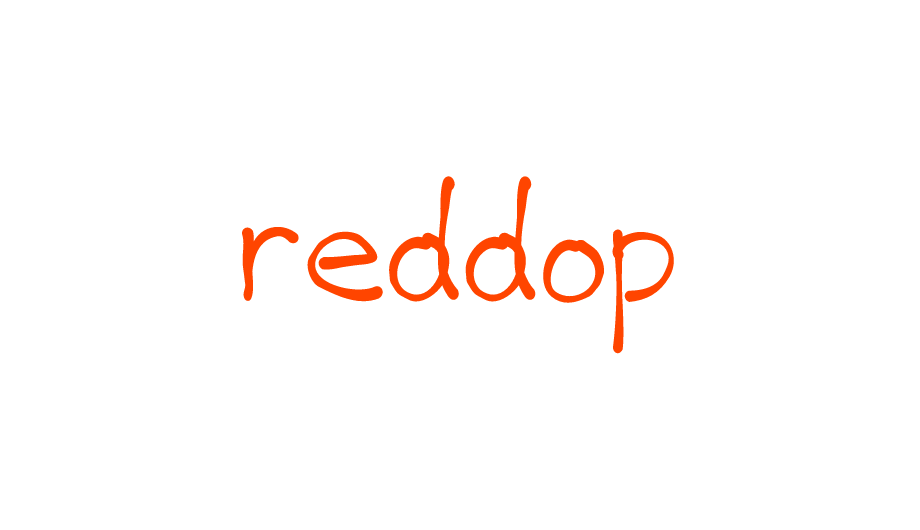
<style>
.page{position:relative;width:920px;height:530px;background:#ffffff}
.page>*{position:absolute;margin:0}
.t1{font:202px "VAG-HandWritten";color:#ff4500}
</style>
<div class="page">
<p class="t1" style="left:241px;top:174px;width:438px;height:182px">reddop</p>
</div>
